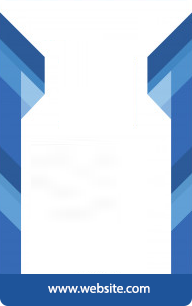
<style>
.page{position:relative;width:192px;height:306px;background:#ffffff}
.page>*{position:absolute;margin:0}
.t1{font:13.3px "MyriadPro-Regular";color:#ffffff}
</style>
<div class="page">
<p class="t1" style="left:48px;top:283px;width:102px;height:10px">www.website.com</p>
</div>
